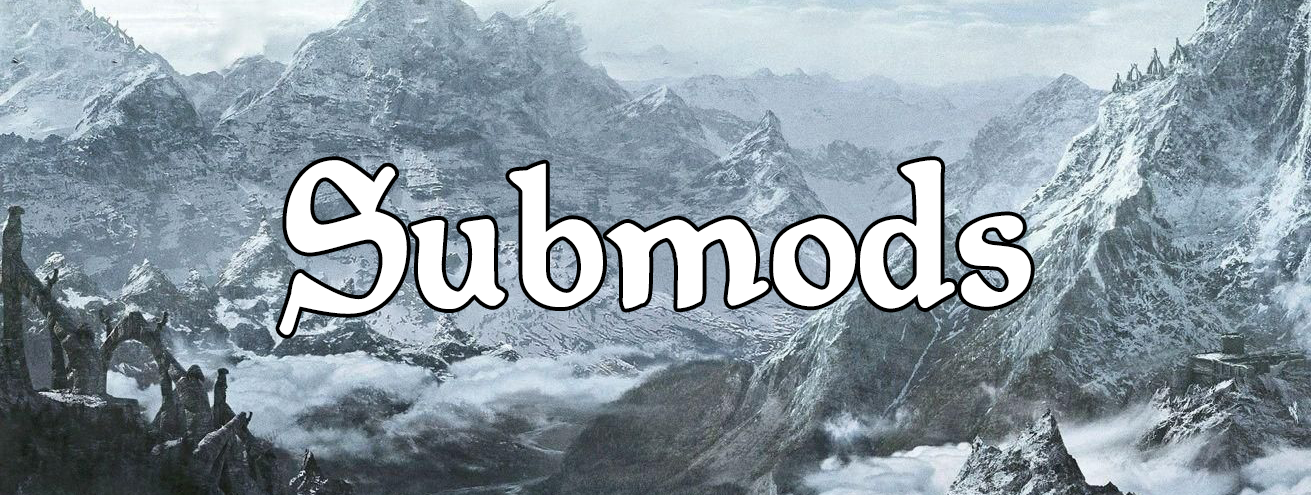
<style>
.page{position:relative;width:1311px;height:495px}
.page>*{position:absolute;margin:0}
.t1{font:200px "Planewalker-Bold";color:#ffffff}
</style>
<div class="page">
<p class="t1" style="left:279px;top:160px;width:752px;height:175px">Submods</p>
</div>
